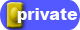
<style>
.page{position:relative;width:80px;height:30px;background:#5359ff}
.page>*{position:absolute;margin:0}
.t1{font:15.9px "Arial-Black";color:#fafafa}
</style>
<div class="page">
<p class="t1" style="left:17px;top:8px;width:61px;height:15px">private</p>
</div>
